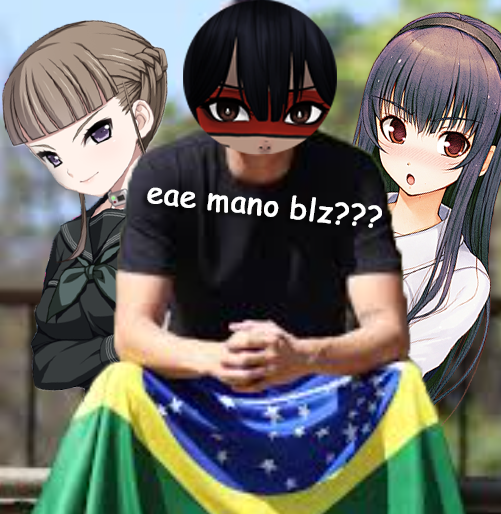
<style>
.page{position:relative;width:501px;height:514px}
.page>*{position:absolute;margin:0}
.t1{font:30px "ComicSansMS";color:#ffffff;font-weight:bold}
</style>
<div class="page">
<p class="t1" style="left:147px;top:187px;width:235px;height:41px;rotate:6deg">eae mano blz???</p>
</div>
